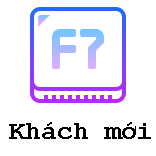
<style>
.page{position:relative;width:156px;height:156px;background:#ffffff}
.page>*{position:absolute;margin:0}
.t1{font:26px "CourierNewPS-BoldMT";color:#000000}
</style>
<div class="page">
<p class="t1" style="left:9px;top:122px;width:142px;height:17px">Khách mới</p>
</div>
